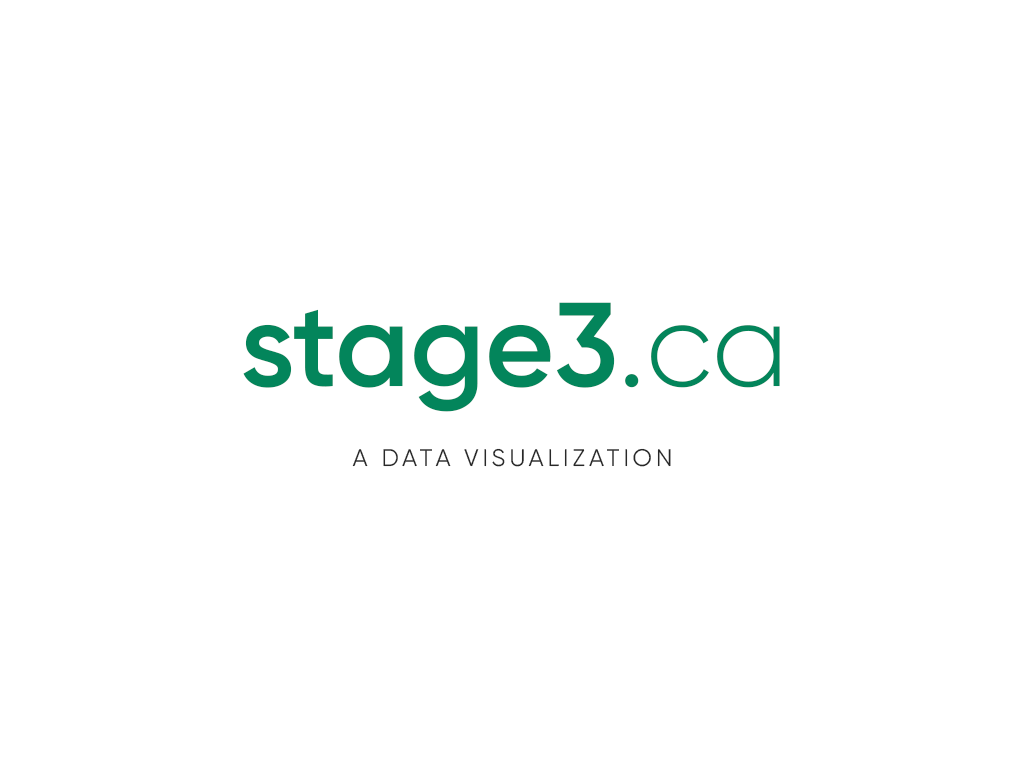
<style>
.page{position:relative;width:1024px;height:768px;background:#ffffff}
.page>*{position:absolute;margin:0}
.t1{font:119px "Gilroy-SemiBold";color:#03855b}
.t2{font:119px "Gilroy-Regular";color:#03855b}
.t3{font:119px "Gilroy-Light";color:#03855b}
.t4{font:24px "Gilroy-Regular";letter-spacing:0.16em;color:#282828}
</style>
<div class="page">
<p class="t1" style="left:243px;top:302px;width:537px;height:110px">stage3<span class="t2">.</span><span class="t3">ca</span></p>
<p class="t4" style="left:352px;top:448px;width:319px;height:19px">A DATA VISUALIZATION</p>
</div>
